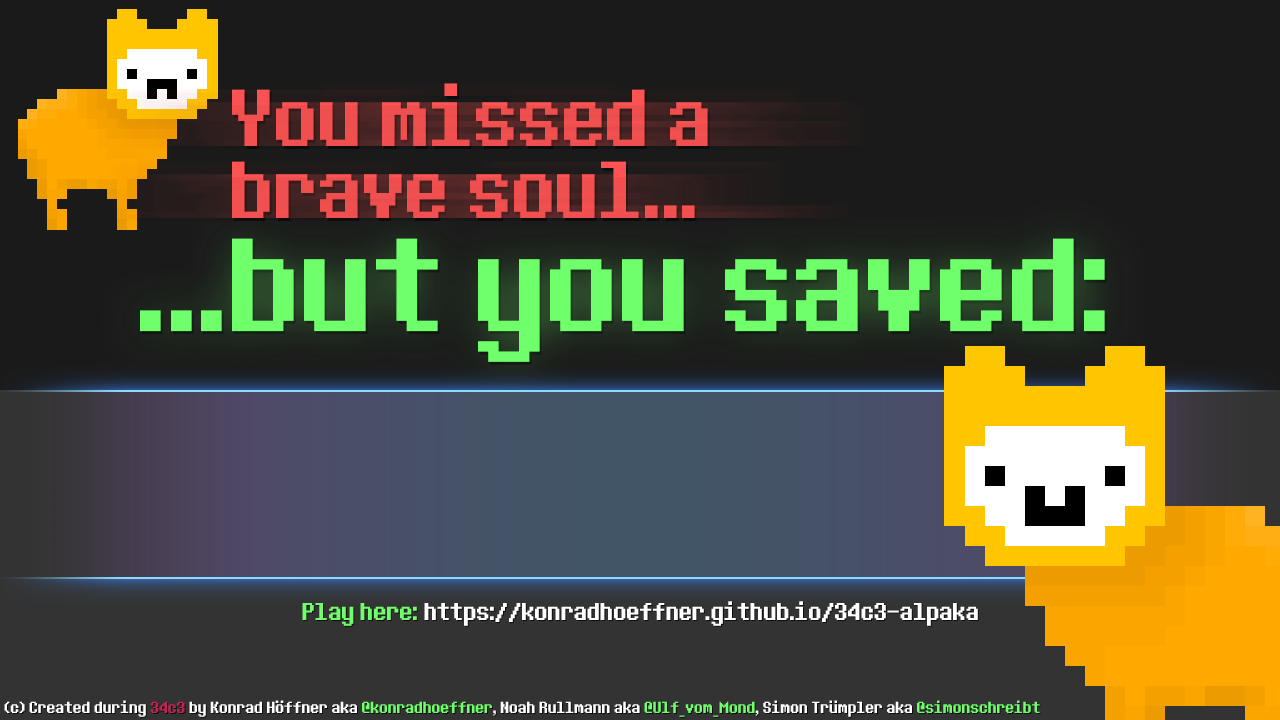
<style>
.page{position:relative;width:1280px;height:720px;background:#1a1a1a}
.page>*{position:absolute;margin:0}
.t1{font:100px/72px "8bitoperator-JVE";color:#ff5454}
.t2{font:164.1px "8bitoperator-JVE";color:#6eff6b}
.t3{font:30px "8bitoperator-JVE";color:#ffffff}
.t4{font:30px "8bitoperator-JVE";color:#6eff6b}
.t5{font:20px "8bitoperator-JVE";color:#ffffff}
.t6{font:20px "8bitoperator-JVE";color:#c12354}
.t7{font:20px "8bitoperator-JVE";color:#6eff6b}
</style>
<div class="page">
<p class="t1" style="left:232px;top:83px;width:476px;height:135px">You missed a <br>brave soul...</p>
<p class="t2" style="left:140px;top:238px;width:965px;height:124px">...but you saved:</p>
<p class="t3" style="left:302px;top:601px;width:676px;height:25px"><span class="t4">Play here:</span> https://konradhoeffner.github.io/34c3-alpaka</p>
<p class="t5" style="left:4px;top:700px;width:1036px;height:17px">(c) Created during <span class="t6">34c3</span> by Konrad Höffner aka <span class="t7">@konradhoeffner</span>, Noah Rullmann aka <span class="t7">@Ulf_vom_Mond</span>, Simon Trümpler aka <span class="t7">@simonschreibt</span></p>
</div>
